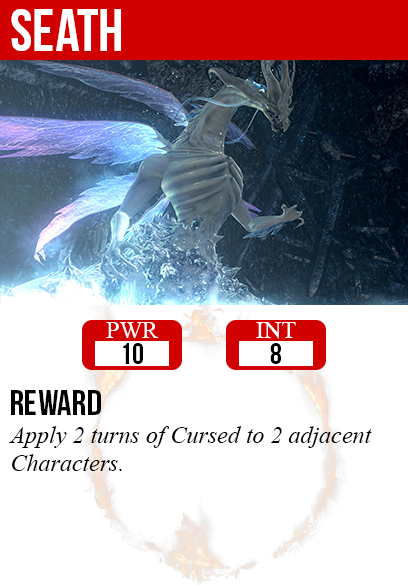
<style>
.page{position:relative;width:408px;height:585px;background:#ffffff}
.page>*{position:absolute;margin:0}
.t1{font:60px "BebasNeue";color:#ffffff}
.t2{font:24px "TimesNewRomanPSMT";color:#ffffff}
.t3{font:30px "BebasNeue";color:#000000}
.t4{font:36px "BebasNeue";color:#000000}
.t5{font:24px "TimesNewRomanPS-ItalicMT";color:#000000}
</style>
<div class="page">
<p class="t1" style="left:11px;top:9px;width:110px;height:42px">seath</p>
<p class="t2" style="left:106px;top:322px;width:53px;height:16px">PWR</p>
<p class="t2" style="left:256px;top:322px;width:40px;height:17px">INT</p>
<p class="t3" style="left:123px;top:343px;width:20px;height:21px">10</p>
<p class="t3" style="left:270px;top:343px;width:11px;height:21px">8</p>
<p class="t4" style="left:11px;top:390px;width:90px;height:25px">reward</p>
<p class="t5" style="left:9px;top:426px;width:363px;height:45px">Apply 2 turns of Cursed to 2 adjacent<br>Characters.</p>
</div>
